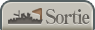
<style>
.page{position:relative;width:95px;height:30px;background:#c5c2b9}
.page>*{position:absolute;margin:0}
.t1{font:20px "RyuminPro-ExBold";letter-spacing:-0.08em;color:#6d6963;scale:0.9 1}
</style>
<div class="page">
<p class="t1" style="left:45px;top:9px;width:45px;height:15px">Sortie</p>
</div>
